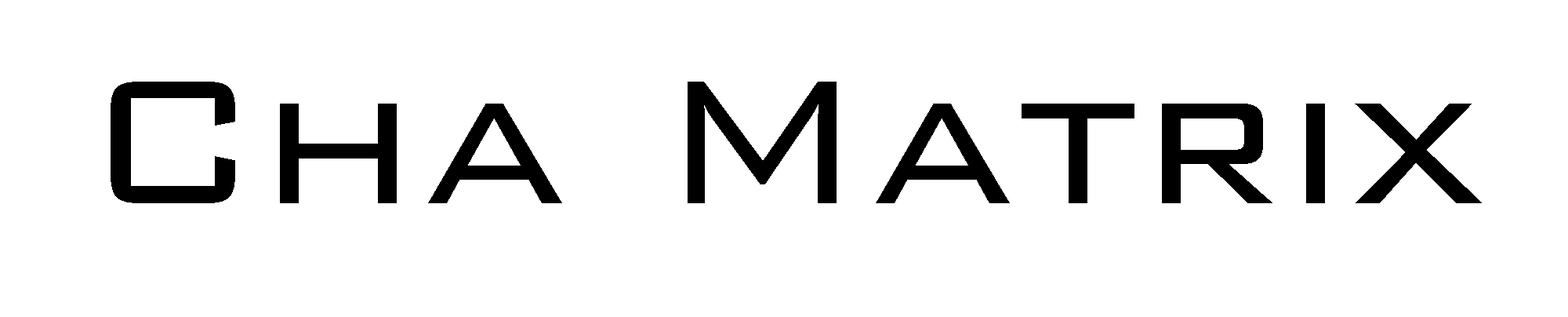
<style>
.page{position:relative;width:1568px;height:317px;background:#ffffff}
.page>*{position:absolute;margin:0}
.t1{font:235.2px "BankGothicBT-Light";color:#000000}
</style>
<div class="page">
<p class="t1" style="left:111px;top:82px;width:1371px;height:121px">Cha Matrix</p>
</div>
